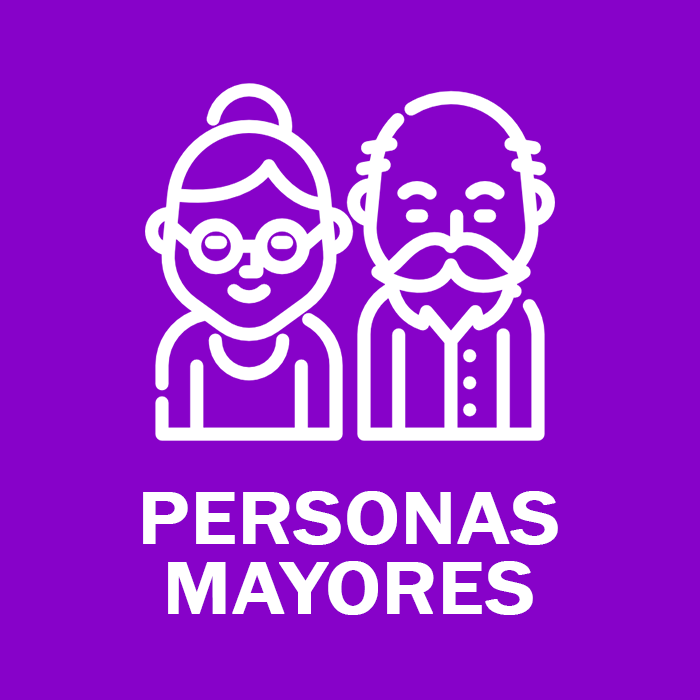
<style>
.page{position:relative;width:700px;height:700px;background:#8702c9}
.page>*{position:absolute;margin:0}
.t1{font:77px/70px "FranklinGothic-Medium";color:#ffffff;font-weight:bold;scale:1.09 1}
</style>
<div class="page">
<p class="t1" style="left:143px;top:491px;width:415px;height:124px;text-align:center">PERSONAS<br>MAYORES</p>
</div>
